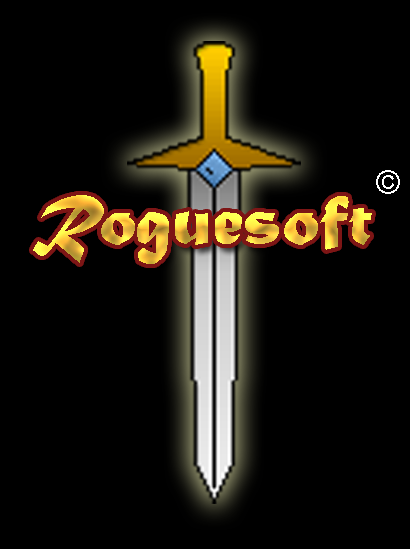
<style>
.page{position:relative;width:410px;height:549px;background:#000000}
.page>*{position:absolute;margin:0}
.t1{font:33.3px "ArialMT";color:#ffffff}
.t2{font:75px "MaturaMTScriptCapitals"}
</style>
<div class="page">
<p class="t1" style="left:376px;top:170px;width:24px;height:24px">©</p>
<p class="t2" style="left:33px;top:195px;width:339px;height:69px">Roguesoft</p>
</div>
